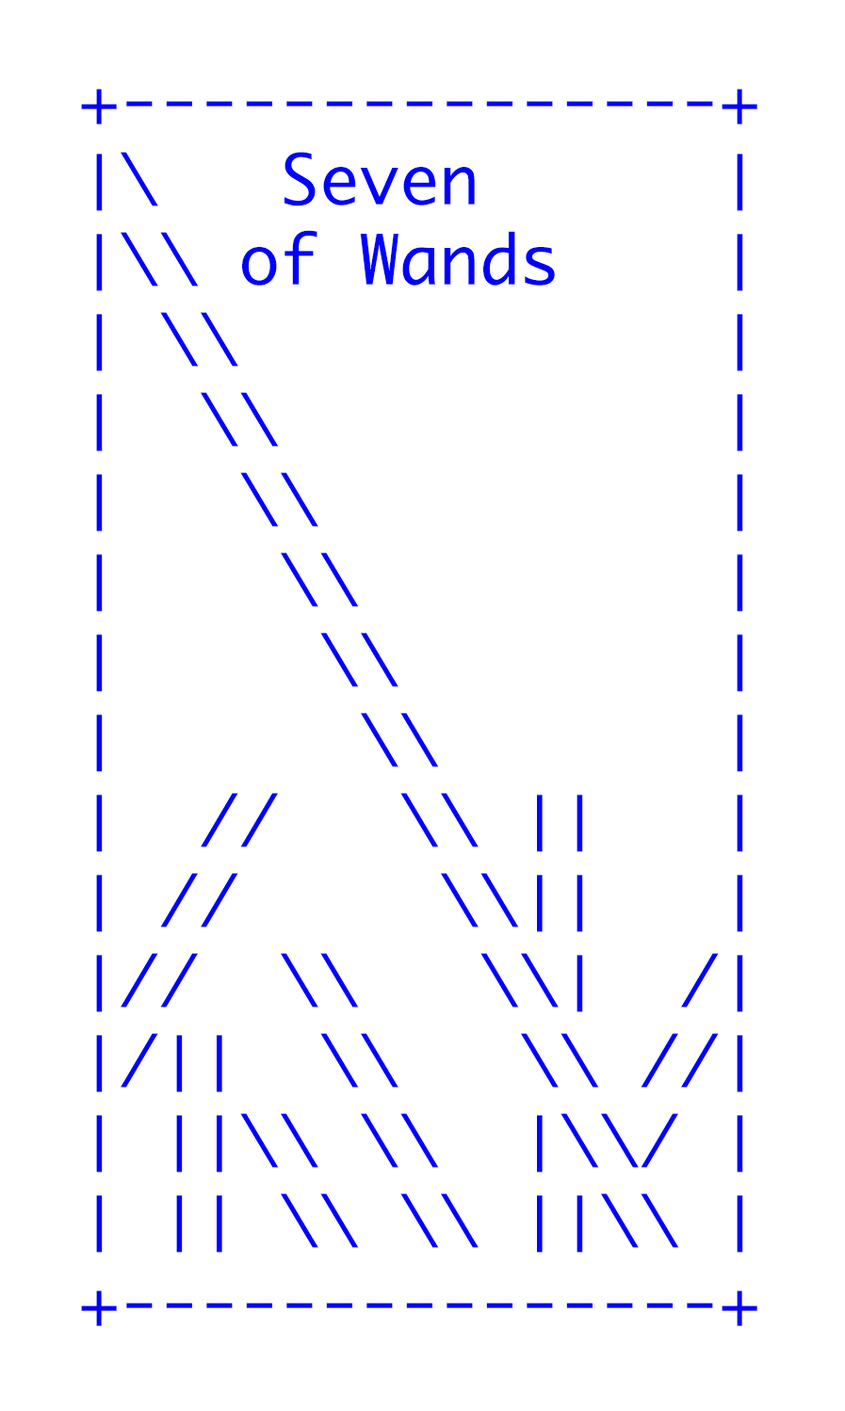
<style>
.page{position:relative;width:845px;height:1411px;background:#ffffff}
.page>*{position:absolute;margin:0}
.t1{font:66.7px "Monaco";color:#0000ff}
</style>
<div class="page">
<p class="t1" style="left:81px;top:89px;width:677px;height:1237px">+---------------+<br>│\   Seven      │<br>│\\ of Wands    │<br>│ \\            │<br>│  \\           │<br>│   \\          │<br>│    \\         │<br>│     \\        │ <br>│      \\       │ <br>│  //   \\ ││   │<br>│ //     \\││   │ <br>│//  \\   \\│  /│ <br>│/││  \\   \\ //│<br>│ ││\\ \\  │\\/ │<br>│ ││ \\ \\ ││\\ │<br>+---------------+</p>
</div>
